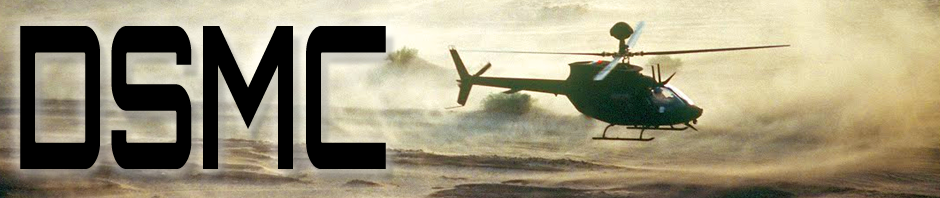
<style>
.page{position:relative;width:940px;height:198px}
.page>*{position:absolute;margin:0}
.t1{font:198.4px "Orbitron-Bold";color:#000000;scale:0.56 1}
</style>
<div class="page">
<p class="t1" style="left:20px;top:26px;width:366px;height:143px">DSMC</p>
</div>
